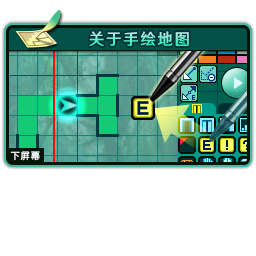
<style>
.page{position:relative;width:256px;height:256px;background:#ffffff}
.page>*{position:absolute;margin:0}
.t1{font:16px "HYWenHei-FEW";letter-spacing:0.105em;scale:0.97 1}
.t2{font:9.3px "FZY3--GB1-4";letter-spacing:0.105em;color:#ffffff;scale:0.97 1}
</style>
<div class="page">
<p class="t1" style="left:89px;top:31px;width:100px;height:15px">关于手绘地图</p>
<p class="t2" style="left:10px;top:151px;width:30px;height:10px">下屏幕</p>
</div>
